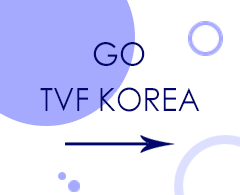
<style>
.page{position:relative;width:240px;height:195px;background:#ffffff}
.page>*{position:absolute;margin:0}
.t1{font:32px "CenturyGothic";color:#02076c;scale:0.97 1}
.t2{font:32px "CenturyGothic";color:#02076c;scale:0.96 1}
</style>
<div class="page">
<p class="t1" style="left:93px;top:42px;width:52px;height:24px">GO</p>
<p class="t2" style="left:40px;top:87px;width:160px;height:25px">TVF KOREA</p>
</div>
